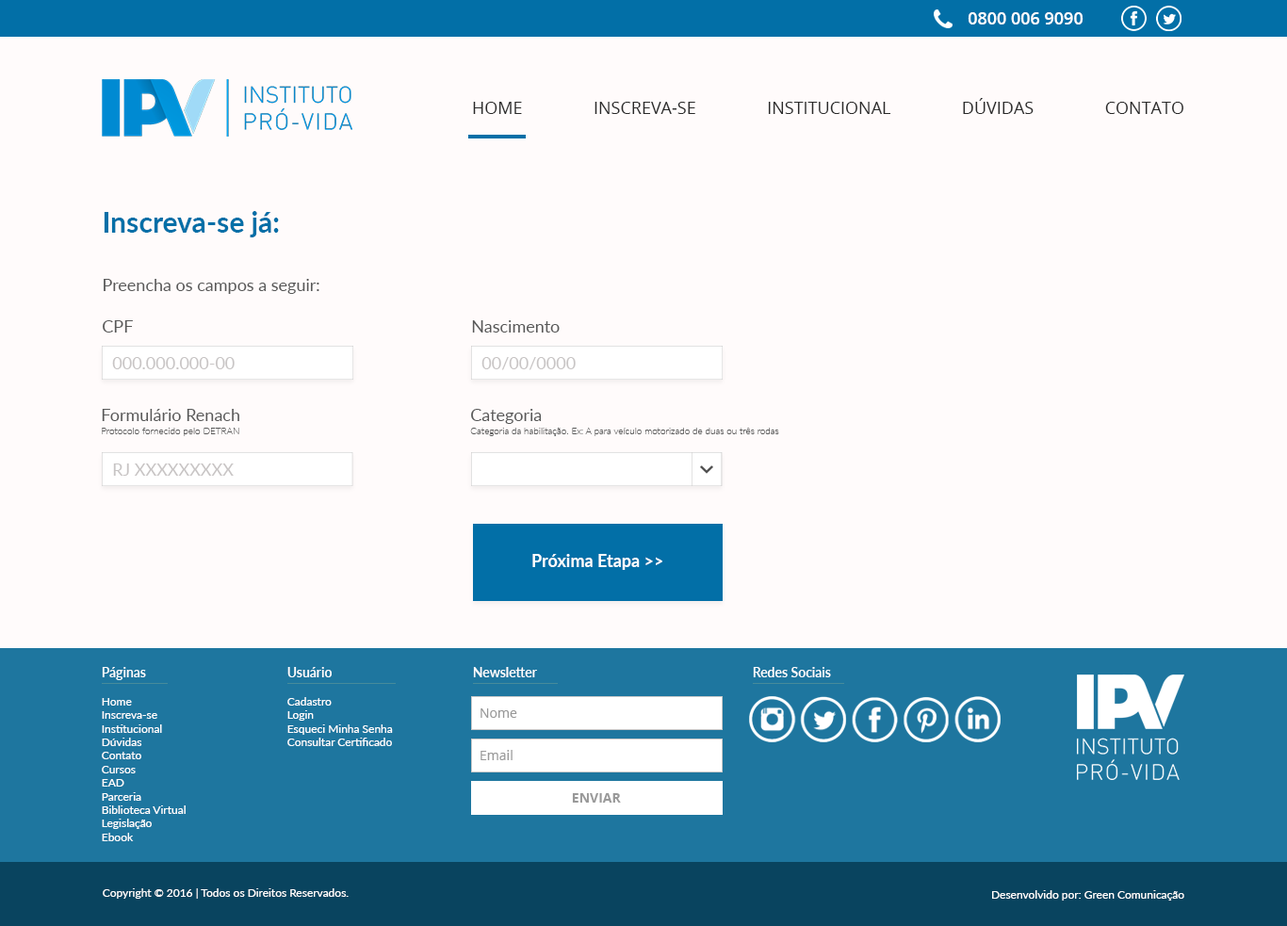
<style>
.page{position:relative;width:1287px;height:926px;background:#fffbfb}
.page>*{position:absolute;margin:0}
.t1{font:17px "OpenSans-Semibold";color:#ffffff}
.t2{font:17px "OpenSans";color:#2a2a2a}
.t3{font:28.3px "Lato-Bold";color:#026fa7}
.t4{font:17px "Lato-Regular";color:#595959}
.t5{font:17px "Lato-Regular";color:#c8c5c5}
.t6{font:9.4px "Lato-Thin";color:#595959}
.t7{font:17px "Lato-Bold";color:#ffffff}
.t8{font:13.2px "Lato-Semibold";color:#ffffff}
.t9{font:11.3px "Lato-Regular";color:#ffffff}
.t10{font:13.2px "OpenSans";color:#999999}
.t11{font:13.2px "OpenSans-Bold";color:#999999}
</style>
<div class="page">
<p class="t1" style="left:968px;top:12px;width:116px;height:13px">0800 006 9090</p>
<p class="t2" style="left:473px;top:98px;width:711px;height:16px">HOME INSCREVA-SE INSTITUCIONAL DÚVIDAS CONTATO</p>
<p class="t3" style="left:104px;top:211px;width:175px;height:26px">Inscreva-se já:</p>
<p class="t4" style="left:104px;top:279px;width:215px;height:15px">Preencha os campos a seguir:</p>
<p class="t4" style="left:103px;top:320px;width:30px;height:13px">CPF</p>
<p class="t4" style="left:472px;top:320px;width:88px;height:13px">Nascimento</p>
<p class="t5" style="left:112px;top:357px;width:123px;height:12px">000.000.000-00</p>
<p class="t5" style="left:482px;top:357px;width:94px;height:13px">00/00/0000</p>
<p class="t4" style="left:102px;top:409px;width:137px;height:12px">Formulário Renach</p>
<p class="t4" style="left:471px;top:409px;width:71px;height:15px">Categoria</p>
<p class="t6" style="left:102px;top:428px;width:137px;height:8px">Protocolo fornecido pelo DETRAN</p>
<p class="t6" style="left:470px;top:428px;width:309px;height:8px">Categoria da habilitação. Ex: A para veículo motorizado de duas ou três rodas</p>
<p class="t5" style="left:113px;top:464px;width:121px;height:12px">RJ XXXXXXXXX</p>
<p class="t7" style="left:532px;top:554px;width:130px;height:16px">Próxima Etapa &gt;&gt;</p>
<p class="t8" style="left:102px;top:667px;width:44px;height:13px">Páginas</p>
<p class="t8" style="left:287px;top:667px;width:45px;height:11px">Usuário</p>
<p class="t8" style="left:473px;top:667px;width:64px;height:11px">Newsletter</p>
<p class="t8" style="left:753px;top:667px;width:78px;height:11px">Redes Sociais</p>
<p class="t9" style="left:102px;top:698px;width:84px;height:144px">Home<br>Inscreva-se<br>Institucional<br>Dúvidas<br>Contato<br>Cursos<br>EAD<br>Parceria<br>Biblioteca Virtual<br>Legislação<br>Ebook</p>
<p class="t9" style="left:287px;top:697px;width:106px;height:49px">Cadastro<br>Login<br>Esqueci Minha Senha<br>Consultar Certificado</p>
<p class="t10" style="left:481px;top:709px;width:36px;height:9px">Nome</p>
<p class="t10" style="left:481px;top:750px;width:32px;height:10px">Email</p>
<p class="t11" style="left:572px;top:793px;width:49px;height:10px">ENVIAR</p>
<p class="t9" style="left:103px;top:889px;width:246px;height:10px">Copyright © 2016 | Todos os Direitos Reservados.</p>
<p class="t9" style="left:992px;top:891px;width:193px;height:10px">Desenvolvido por: Green Comunicação</p>
</div>
